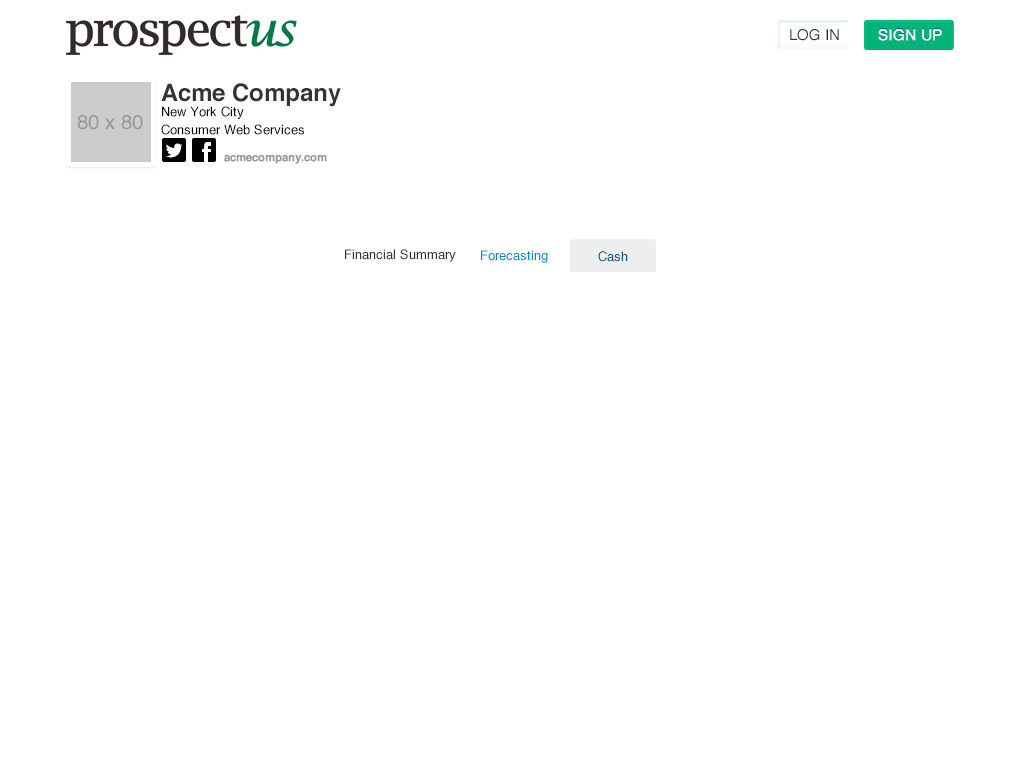
<style>
.page{position:relative;width:1024px;height:768px;background:#ffffff}
.page>*{position:absolute;margin:0}
.t1{font:15px "Helvetica";color:#333333}
.t2{font:15px "Helvetica";color:#ffffff;font-weight:bold}
.t3{font:24px "Helvetica-Bold";color:#333333}
.t4{font:13px/18.2px "Helvetica";color:#000000}
.t5{font:20px "Helvetica";color:#969696}
.t6{font:11px "Helvetica-Bold";color:#999999;font-weight:bold}
.t7{font:13px "Helvetica";color:#333333}
.t8{font:13px "Helvetica";color:#0086c9}
.t9{font:13px "Helvetica";color:#00537e}
</style>
<div class="page">
<p class="t1" style="left:790px;top:29px;width:49px;height:12px">LOG IN</p>
<p class="t2" style="left:878px;top:29px;width:64px;height:12px">SIGN UP</p>
<p class="t3" style="left:161px;top:83px;width:180px;height:24px">Acme Company</p>
<p class="t4" style="left:161px;top:106px;width:143px;height:29px">New York City<br>Consumer Web Services</p>
<p class="t5" style="left:77px;top:115px;width:66px;height:15px">80 x 80</p>
<p class="t6" style="left:224px;top:155px;width:103px;height:9px">acmecompany.com</p>
<p class="t7" style="left:345px;top:249px;width:111px;height:13px">Financial Summary</p>
<p class="t8" style="left:481px;top:250px;width:67px;height:13px">Forecasting</p>
<p class="t9" style="left:598px;top:251px;width:30px;height:11px">Cash</p>
</div>
